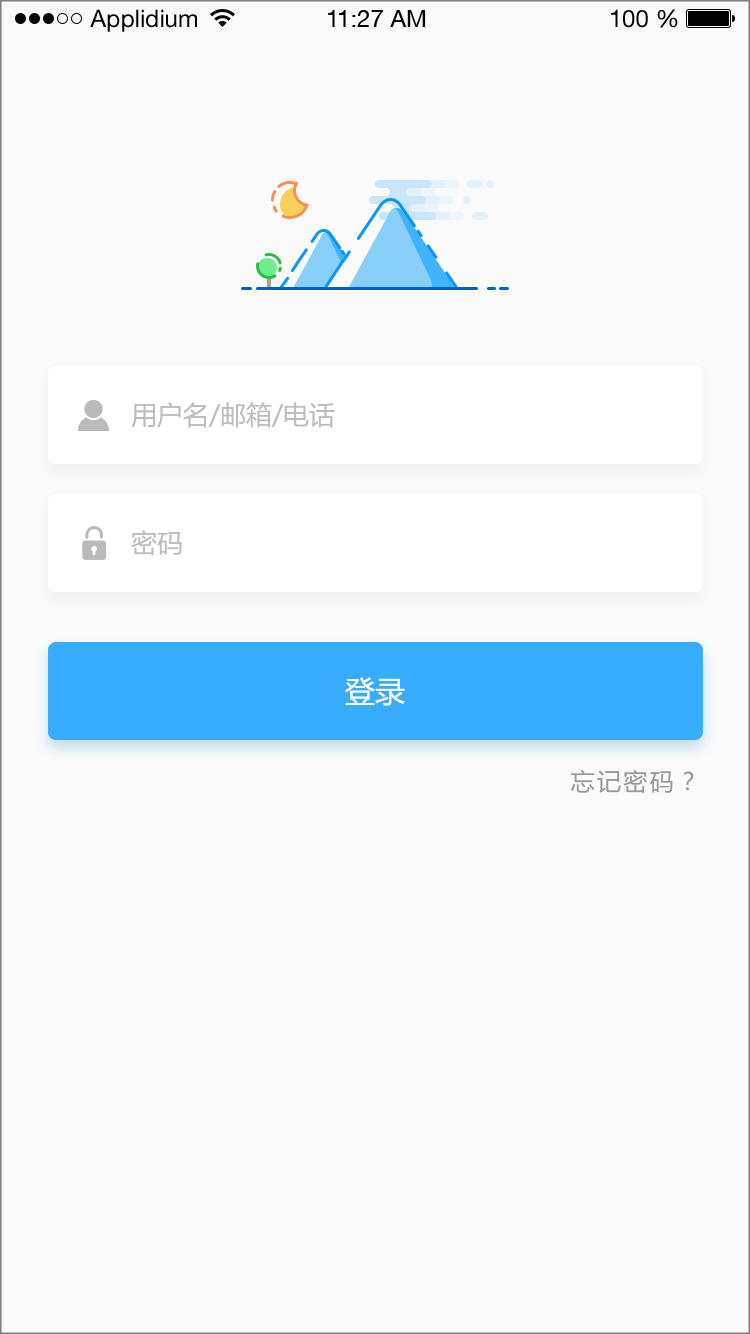
<style>
.page{position:relative;width:750px;height:1334px;background:#fafafa}
.page>*{position:absolute;margin:0}
.t1{font:24px "HelveticaNeueLTStd-Roman";color:#000000}
.t2{font:24px "HelveticaNeueCE-Roman";color:#000000}
.t3{font:26px "MicrosoftYaHei";color:#bdbdbd}
.t4{font:30px "MicrosoftYaHei";color:#feffff}
.t5{font:24px "MicrosoftYaHei";letter-spacing:0.1em;color:#999999}
</style>
<div class="page">
<p class="t1" style="left:90px;top:9px;width:107px;height:23px">Applidium</p>
<p class="t2" style="left:328px;top:10px;width:98px;height:17px">11:27 AM</p>
<p class="t1" style="left:611px;top:9px;width:67px;height:19px">100 %</p>
<p class="t3" style="left:131px;top:402px;width:204px;height:26px">用户名/邮箱/电话</p>
<p class="t3" style="left:131px;top:530px;width:51px;height:26px">密码</p>
<p class="t4" style="left:345px;top:677px;width:60px;height:29px">登录</p>
<p class="t5" style="left:571px;top:770px;width:123px;height:23px">忘记密码？</p>
</div>
